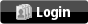
<style>
.page{position:relative;width:88px;height:24px;background:#4d4d4d}
.page>*{position:absolute;margin:0}
.t1{font:13px "KozGoPro-Heavy";color:#ffffff}
</style>
<div class="page">
<p class="t1" style="left:37px;top:6px;width:33px;height:14px">Login</p>
</div>
